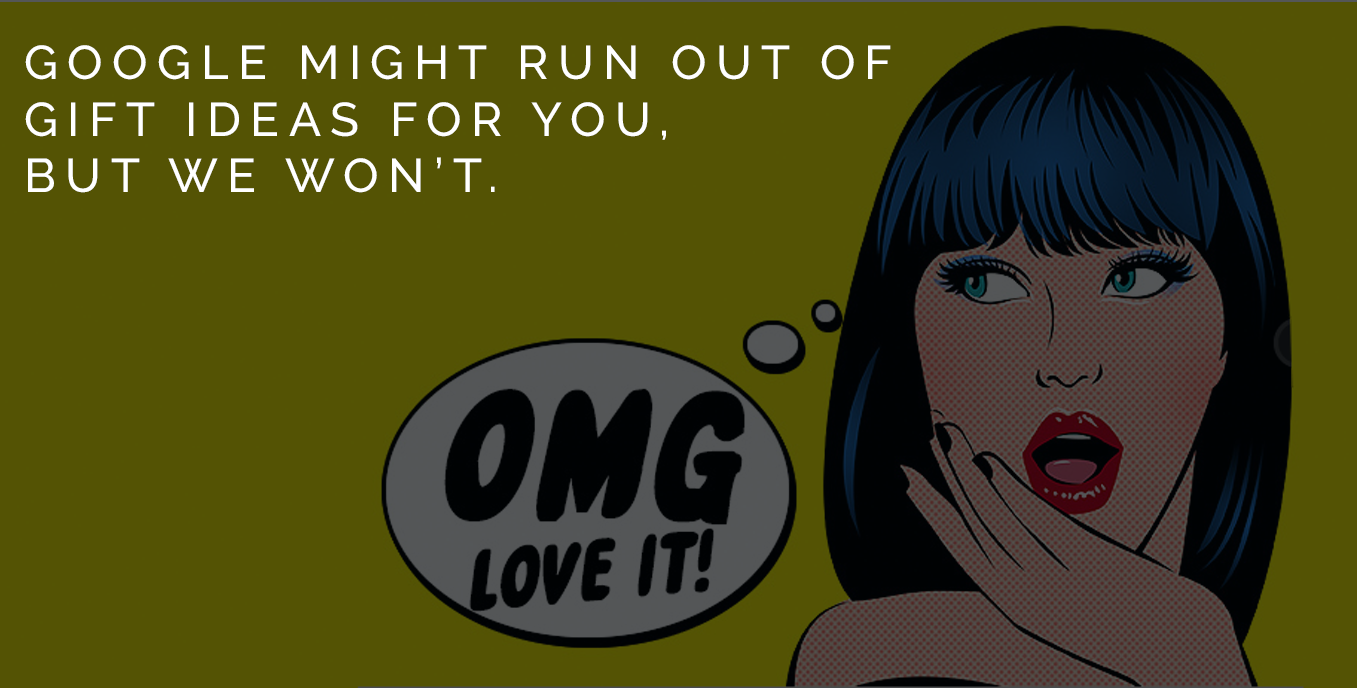
<style>
.page{position:relative;width:1357px;height:688px;background:#545304}
.page>*{position:absolute;margin:0}
.t1{font:47.1px "Raleway-Medium";letter-spacing:0.2em;color:#ffffff}
</style>
<div class="page">
<p class="t1" style="left:25px;top:45px;width:866px;height:148px">GOOGLE MIGHT RUN OUT OF <br>GIFT IDEAS FOR YOU,<br>BUT WE WON’T.</p>
</div>
